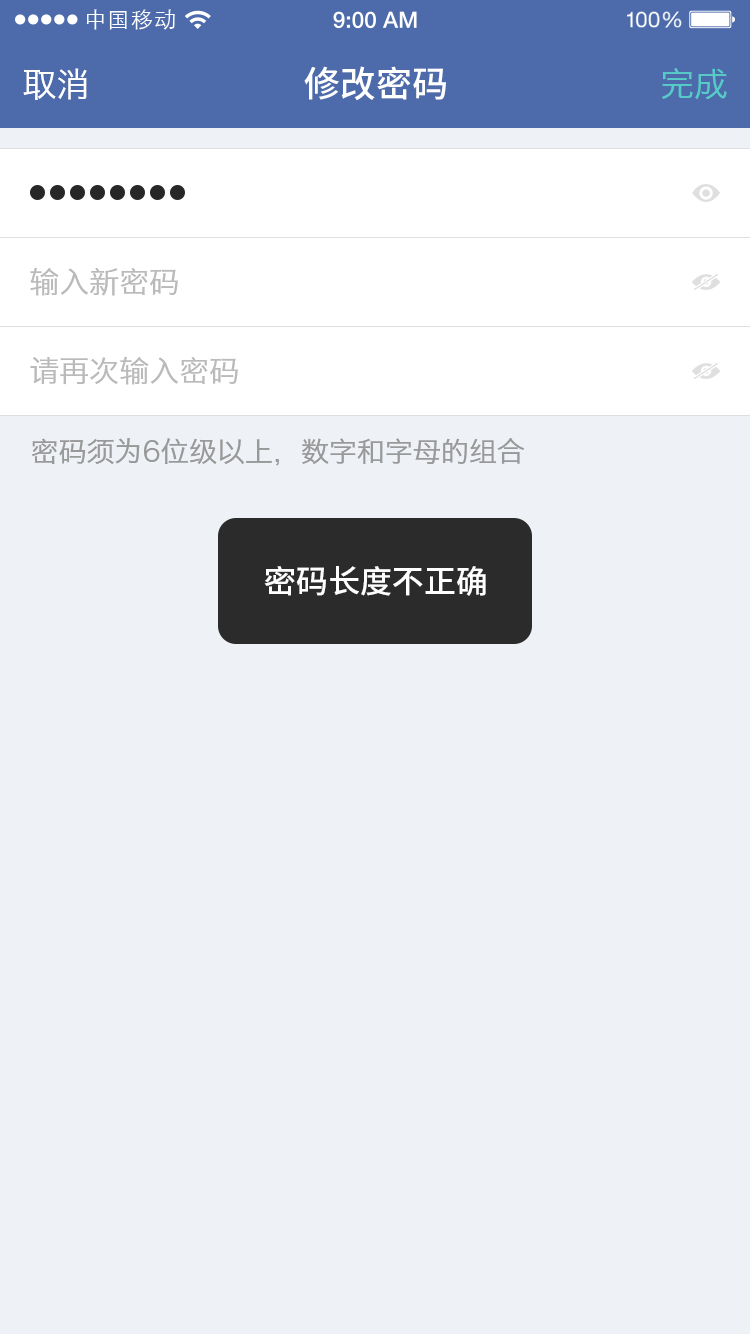
<style>
.page{position:relative;width:750px;height:1334px;background:#eef1f6}
.page>*{position:absolute;margin:0}
.t1{font:21.9px "STXihei";letter-spacing:0.04em;color:#ffffff}
.t2{font:34px "HiraginoSansGB-W3";color:#ffffff}
.t3{font:36px "NotoSansHans-Medium";color:#ffffff}
.t4{font:34px "HiraginoSansGB-W3";color:#57cbc8}
.t5{font:30px "HiraginoSansGB-W3";color:#bababa}
.t6{font:28px "HiraginoSansGB-W3";color:#999999}
.t7{font:32px "NotoSansHans-Medium";color:#ffffff}
</style>
<div class="page">
<p class="t1" style="left:86px;top:9px;width:89px;height:21px">中国移动</p>
<p class="t2" style="left:23px;top:68px;width:64px;height:32px">取消</p>
<p class="t3" style="left:304px;top:66px;width:142px;height:35px">修改密码</p>
<p class="t4" style="left:662px;top:68px;width:65px;height:32px">完成</p>
<p class="t5" style="left:30px;top:267px;width:148px;height:29px">输入新密码</p>
<p class="t5" style="left:30px;top:356px;width:208px;height:29px">请再次输入密码</p>
<p class="t6" style="left:32px;top:438px;width:493px;height:28px">密码须为6位级以上，数字和字母的组合</p>
<p class="t7" style="left:264px;top:566px;width:222px;height:30px">密码长度不正确</p>
</div>
